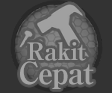
<style>
.page{position:relative;width:112px;height:93px;background:#333333}
.page>*{position:absolute;margin:0}
.t1{font:24px/24px "RyuminPro-ExBold";letter-spacing:-0.04em;color:#a4a4a4}
.t2{font:30px/24px "RyuminPro-ExBold";letter-spacing:-0.04em;color:#a4a4a4}
</style>
<div class="page">
<p class="t1" style="left:20px;top:42px;width:74px;height:47px;text-align:center">Rakit<br><span class="t2">Cepat</span></p>
</div>
